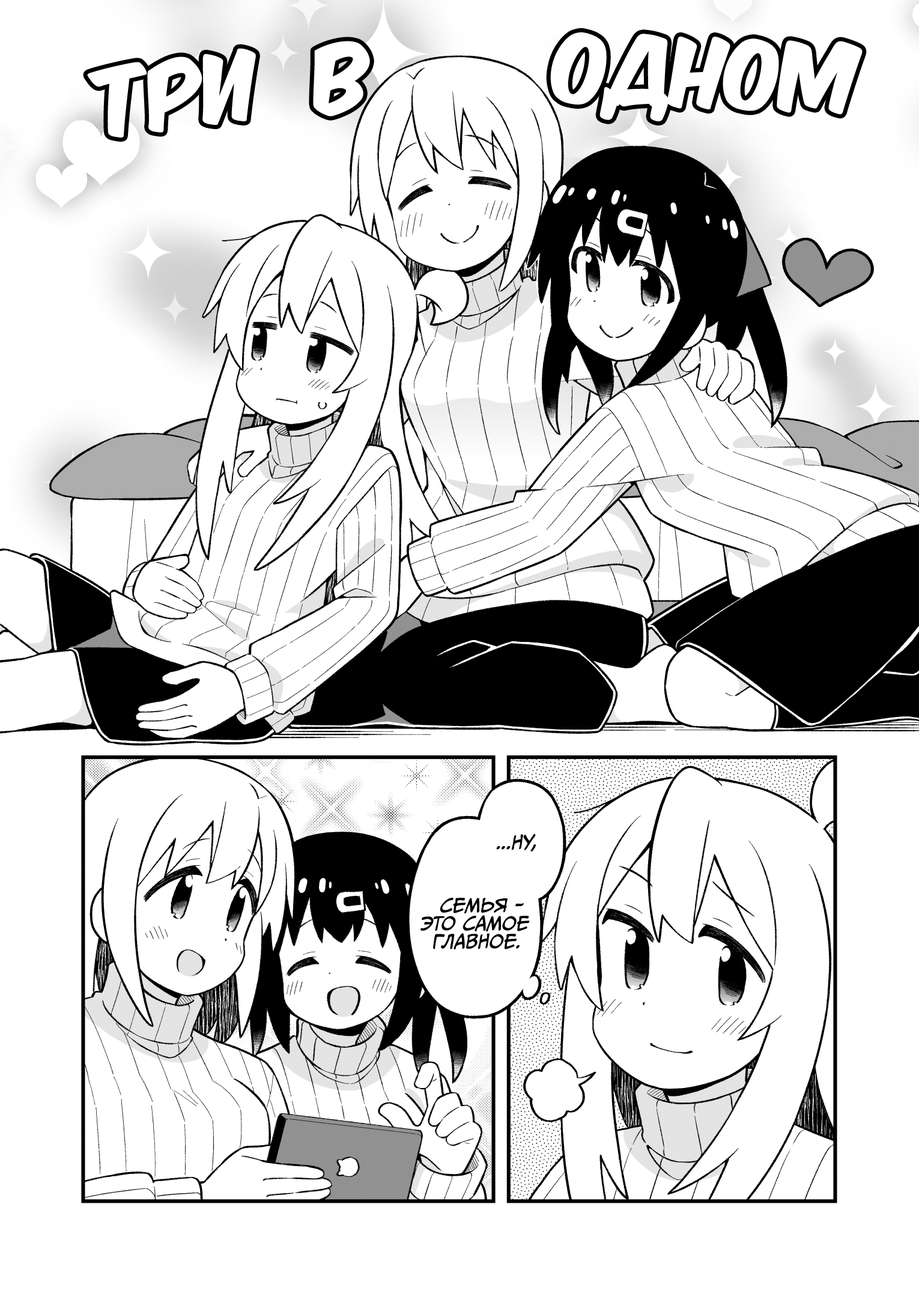
<style>
.page{position:relative;width:919px;height:1297px;background:#ffffff}
.page>*{position:absolute;margin:0}
.t1{font:81.7px "KomikaTitle-AxisRUS-LAT";color:#ffffff}
.t2{font:18px "CCMeanwhile";color:#000000;text-transform:uppercase;font-style:italic}
</style>
<div class="page">
<p class="t1" style="left:313px;top:41px;width:57px;height:76px;rotate:-4deg">в</p>
<p class="t1" style="left:550px;top:32px;width:313px;height:89px;rotate:2deg">одном</p>
<p class="t1" style="left:87px;top:48px;width:169px;height:90px;rotate:-7deg">три</p>
<p class="t2" style="left:496px;top:834px;width:40px;height:18px">...Ну,</p>
<p class="t2" style="left:420px;top:898px;width:110px;height:52px;text-align:center">семья -<br>это самое<br>главное.</p>
</div>
